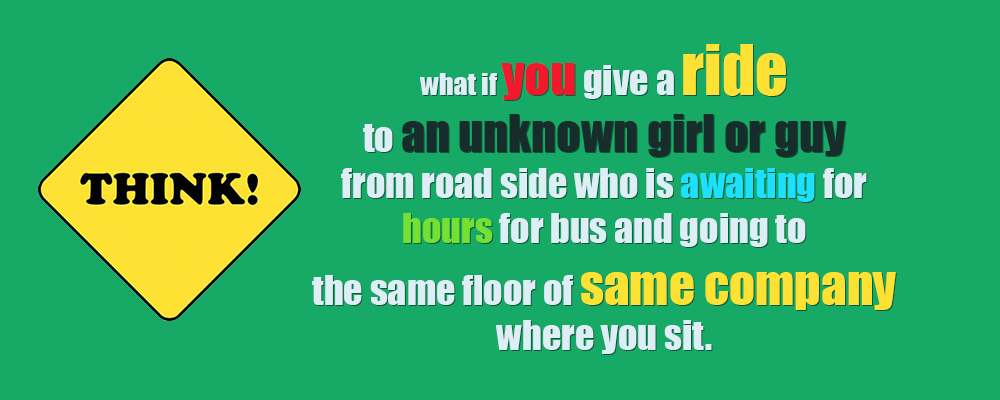
<style>
.page{position:relative;width:1000px;height:400px;background:#17aa66}
.page>*{position:absolute;margin:0}
.t1{font:38px "Impact";color:#ddeef7}
.t2{font:28px "Impact";color:#ddeef7}
.t3{font:50px "Impact";color:#f3182c}
.t4{font:64px "Impact";color:#fde135}
.t5{font:48px "Impact";color:#162d2c}
.t6{font:38px "Impact";color:#1de0fd}
.t7{font:38px "Impact";color:#74e132}
.t8{font:51px "Impact";color:#fde233}
</style>
<div class="page">
<p class="t1" style="left:312px;top:44px;width:584px;height:310px;text-align:center"><span class="t2">what if </span><span class="t3">you</span> give a <span class="t4">ride</span><br>to <span class="t5">an unknown girl or guy</span><br>from road side who is<span class="t6"> awaiting</span> for <span class="t7">hours</span> for bus and going to <br>the same floor of <span class="t8">same company</span> where you sit.</p>
</div>
